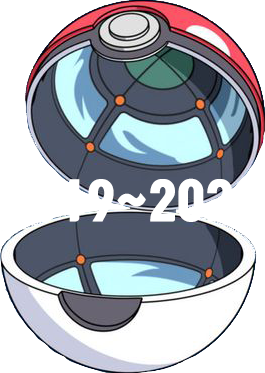
<style>
.page{position:relative;width:265px;height:373px;background:#ffffff}
.page>*{position:absolute;margin:0}
.t1{font:48px "TmonMonsoriBlack";color:#ffffff;font-weight:bold;scale:0.95 1}
</style>
<div class="page">
<p class="t1" style="left:3px;top:178px;width:258px;height:44px">2019~2022</p>
</div>
